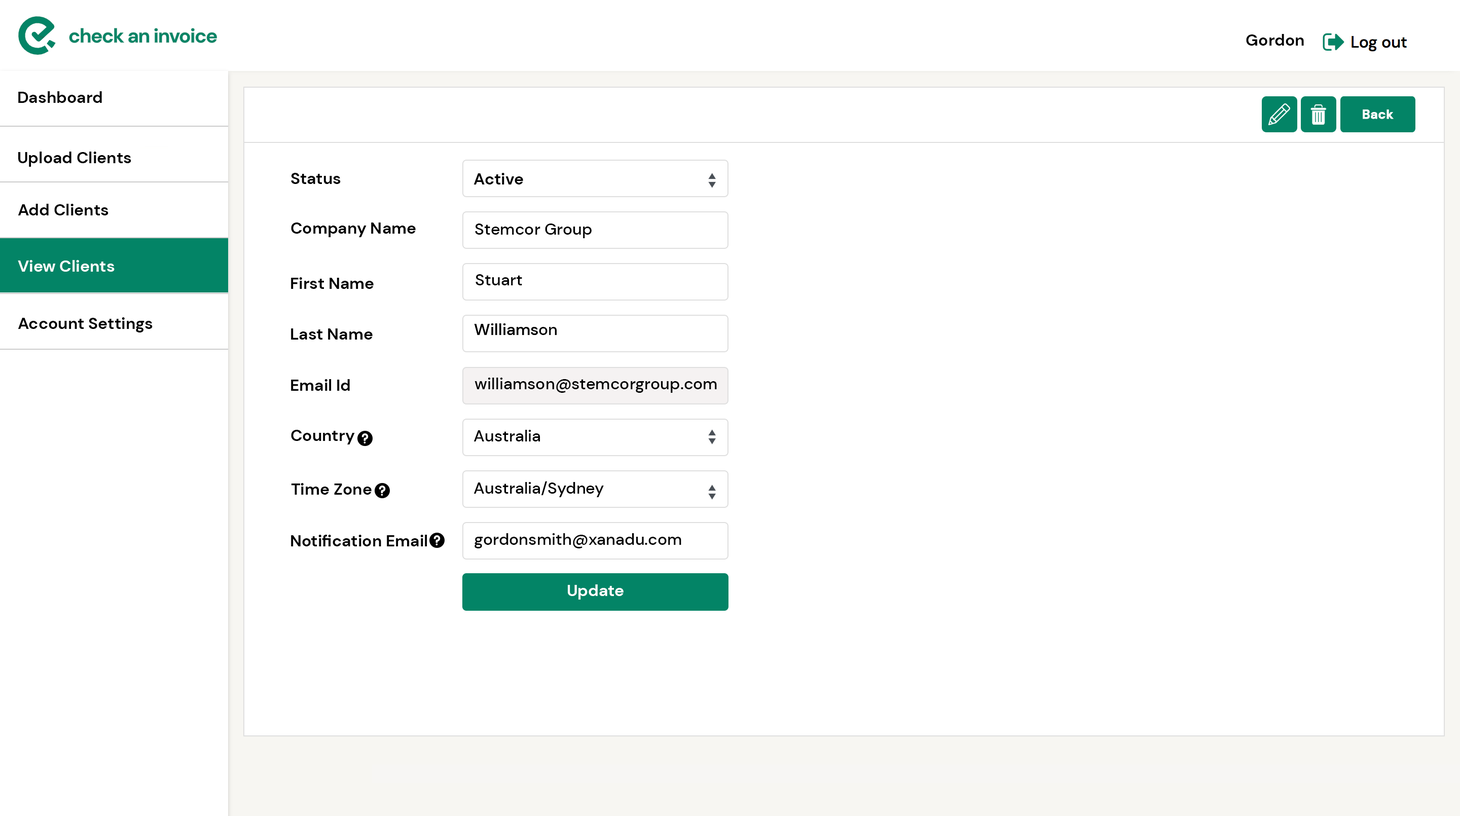
<style>
.page{position:relative;width:1460px;height:816px;background:#ffffff}
.page>*{position:absolute;margin:0}
.t1{font:16.2px "DMSans-Bold";color:#000000}
.t2{font:12.7px "DMSans-Bold";color:#ffffff;font-weight:bold}
.t3{font:16.2px "DMSans-Medium";color:#000000}
.t4{font:16.2px "DMSans-Bold";color:#ffffff}
</style>
<div class="page">
<p class="t1" style="left:1246px;top:34px;width:58px;height:12px">Gordon</p>
<p class="t1" style="left:18px;top:91px;width:84px;height:12px">Dashboard</p>
<p class="t2" style="left:1363px;top:110px;width:31px;height:9px">Back</p>
<p class="t1" style="left:18px;top:152px;width:113px;height:15px">Upload Clients</p>
<p class="t1" style="left:291px;top:173px;width:50px;height:11px">Status</p>
<p class="t1" style="left:474px;top:173px;width:49px;height:12px">Active</p>
<p class="t1" style="left:18px;top:204px;width:91px;height:12px">Add Clients</p>
<p class="t1" style="left:291px;top:223px;width:125px;height:14px">Company Name</p>
<p class="t3" style="left:475px;top:224px;width:117px;height:14px">Stemcor Group</p>
<p class="t4" style="left:18px;top:260px;width:97px;height:12px">View Clients</p>
<p class="t1" style="left:291px;top:277px;width:83px;height:12px">First Name</p>
<p class="t3" style="left:476px;top:274px;width:46px;height:12px">Stuart</p>
<p class="t1" style="left:18px;top:317px;width:135px;height:16px">Account Settings</p>
<p class="t1" style="left:291px;top:329px;width:82px;height:11px">Last Name</p>
<p class="t3" style="left:474px;top:324px;width:64px;height:11px">Williams</p>
<p class="t3" style="left:474px;top:324px;width:83px;height:11px">Williamson</p>
<p class="t3" style="left:475px;top:378px;width:242px;height:15px">williamson@stemcorgroup.com</p>
<p class="t1" style="left:291px;top:379px;width:59px;height:12px">Email Id</p>
<p class="t1" style="left:291px;top:430px;width:64px;height:15px">Country</p>
<p class="t3" style="left:474px;top:430px;width:67px;height:12px">Australia</p>
<p class="t1" style="left:291px;top:483px;width:81px;height:12px">Time Zone</p>
<p class="t3" style="left:474px;top:481px;width:130px;height:16px">Australia/Sydney</p>
<p class="t3" style="left:475px;top:533px;width:207px;height:16px">gordonsmith@xanadu.com</p>
<p class="t1" style="left:291px;top:535px;width:136px;height:12px">Notification Email</p>
<p class="t4" style="left:568px;top:585px;width:56px;height:15px">Update</p>
</div>
